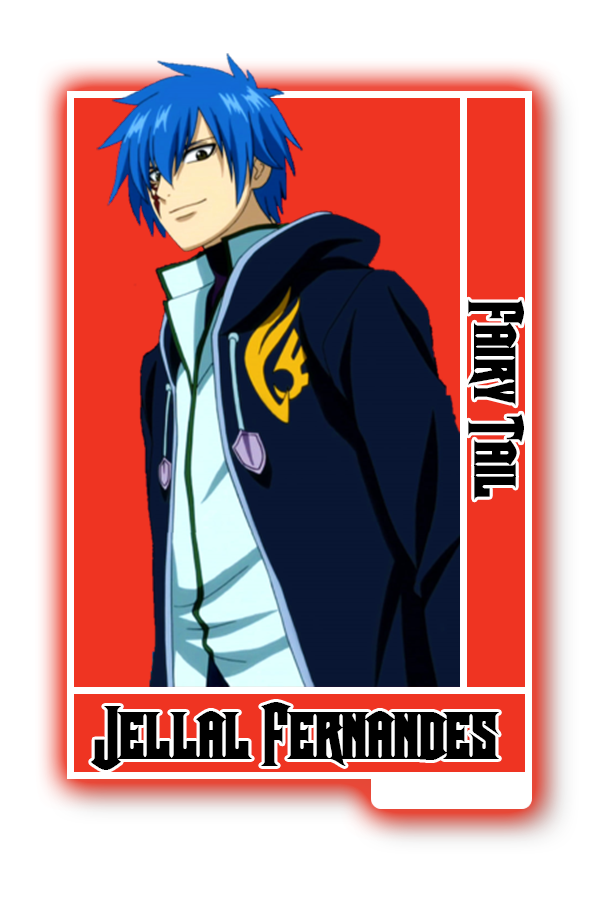
<style>
.page{position:relative;width:600px;height:900px;background:#ffffff}
.page>*{position:absolute;margin:0}
.t1{font:61.5px "Crown-Title";color:#000000}
.t2{font:70.1px "Crown-Title";color:#000000}
</style>
<div class="page">
<p class="t1" style="left:468px;top:299px;width:56px;height:201px;rotate:90deg">Fairy Tail</p>
<p class="t2" style="left:91px;top:702px;width:408px;height:68px">Jellal Fernandes</p>
</div>
